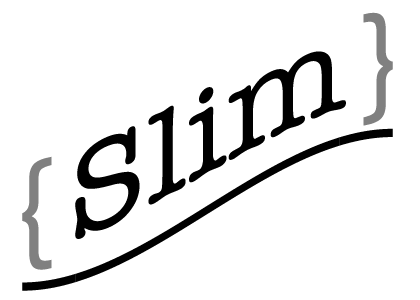
<style>
.page{position:relative;width:420px;height:300px;background:#ffffff}
.page>*{position:absolute;margin:0}
.t1{font:128px "AmericanTypewriter";color:#000000}
.t2{font:128px "AmericanTypewriter";color:#808080}
.t3{font:128px "AmericanTypewriter";color:#000000;scale:0.83 1}
</style>
<div class="page">
<p class="t1" style="left:22px;top:12px;width:371px;height:258px;text-align:center"><span class="t2">{</span>Slim<span class="t2">}</span></p>
<p class="t3" style="left:22px;top:128px;width:371px;height:163px">_______</p>
</div>
